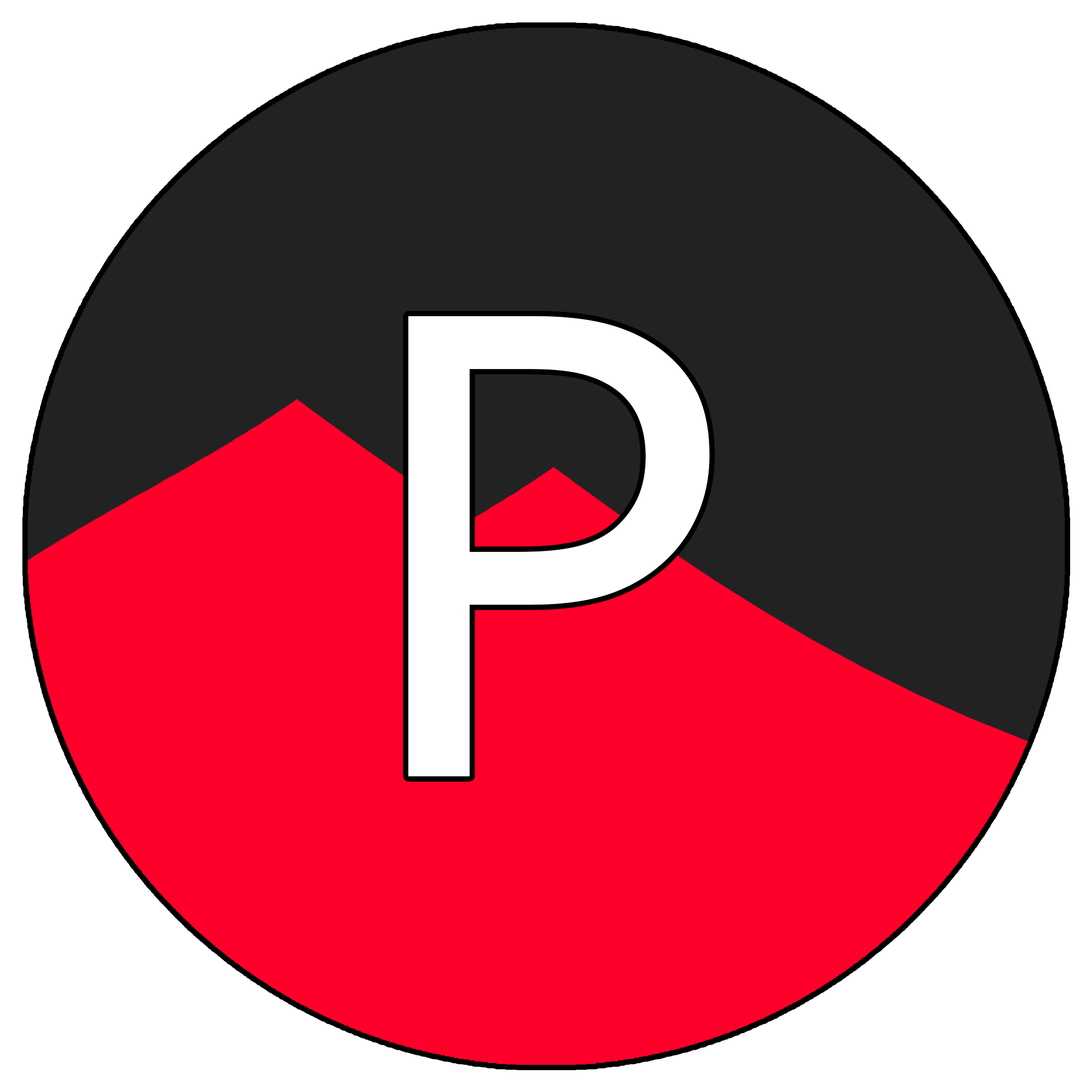
<style>
.page{position:relative;width:1092px;height:1092px;background:#222222}
.page>*{position:absolute;margin:0}
.t1{font:633.1px "MSReferenceSansSerif";color:#ffffff}
</style>
<div class="page">
<p class="t1" style="left:408px;top:316px;width:302px;height:460px">P</p>
</div>
